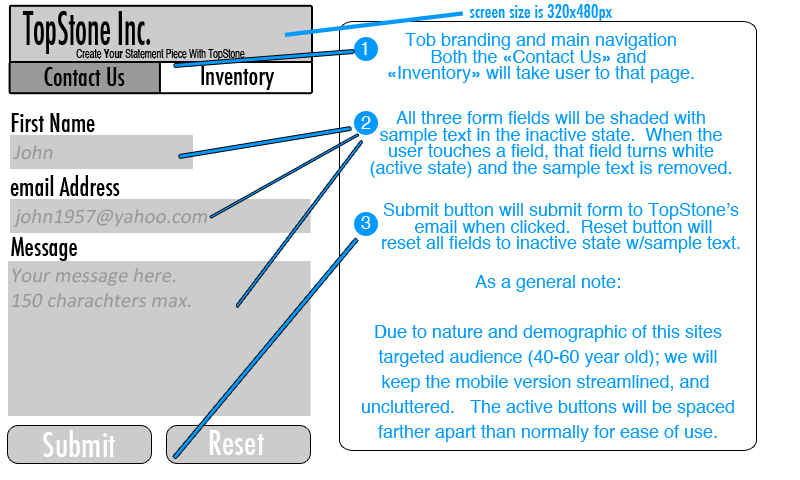
<style>
.page{position:relative;width:800px;height:480px;background:#ffffff}
.page>*{position:absolute;margin:0}
.t1{font:18px "Futura-CondensedMedium";color:#0099ff}
.t2{font:45.8px "Futura-CondensedMedium";color:#000000;scale:0.67 1}
.t3{font:18px/16.7px "Helvetica";color:#0099ff}
.t4{font:12.5px "Helvetica";color:#000000;scale:0.67 1}
.t5{font:12.5px "Helvetica-Bold";color:#000000;scale:0.67 1}
.t6{font:18px "Helvetica";color:#ffffff}
.t7{font:25px "Futura-CondensedMedium";color:#000000}
.t8{font:20.8px "Calibri";color:#999999;font-style:italic}
.t9{font:20.8px/25px "Calibri";color:#999999;font-style:italic}
.t10{font:18px/25px "Helvetica";color:#0099ff}
.t11{font:33.3px "Futura-CondensedMedium";color:#ffffff}
</style>
<div class="page">
<p class="t1" style="left:469px;top:4px;width:144px;height:18px">screen size is 320x480px</p>
<p class="t2" style="left:22px;top:11px;width:129px;height:43px">TopStone Inc.</p>
<p class="t3" style="left:388px;top:33px;width:306px;height:50px;text-align:center">Tob branding and main navigation<br>Both the «Contact Us» and <br>«Inventory» will take user to that page.</p>
<p class="t4" style="left:76px;top:49px;width:169px;height:12px">Create <span class="t5">Your</span> Statement Piece With TopStone</p>
<p class="t6" style="left:361px;top:42px;width:6px;height:13px">1</p>
<p class="t7" style="left:44px;top:67px;width:81px;height:19px">Contact Us</p>
<p class="t7" style="left:201px;top:66px;width:74px;height:24px">Inventory</p>
<p class="t7" style="left:11px;top:113px;width:84px;height:19px">First Name</p>
<p class="t3" style="left:370px;top:111px;width:361px;height:67px;text-align:center">All three form fields will be shaded with<br>sample text in the inactive state.  When the<br>user touches a field, that field turns white<br>(active state) and the sample text is removed.</p>
<p class="t6" style="left:361px;top:116px;width:10px;height:13px">2</p>
<p class="t8" style="left:13px;top:144px;width:40px;height:16px">John</p>
<p class="t7" style="left:10px;top:175px;width:110px;height:21px">email Address</p>
<p class="t8" style="left:13px;top:208px;width:195px;height:19px">john1957@yahoo.com</p>
<p class="t3" style="left:382px;top:203px;width:358px;height:50px;text-align:center">Submit button will submit form to TopStone’s<br> email when clicked.  Reset button will<br>reset all fields to inactive state w/sample text.</p>
<p class="t6" style="left:361px;top:216px;width:10px;height:13px">3</p>
<p class="t7" style="left:11px;top:237px;width:66px;height:24px">Message</p>
<p class="t9" style="left:11px;top:267px;width:180px;height:41px">Your message here.<br>150 charachters max.</p>
<p class="t10" style="left:362px;top:275px;width:372px;height:167px;text-align:center">As a general note:<br><br>Due to nature and demographic of this sites<br>targeted audience (40-60 year old); we will<br>keep the mobile version streamlined, and <br>uncluttered.   The active buttons will be spaced<br>farther apart than normally for ease of use.</p>
<p class="t11" style="left:43px;top:430px;width:72px;height:27px">Submit</p>
<p class="t11" style="left:209px;top:430px;width:55px;height:25px">Reset</p>
</div>
